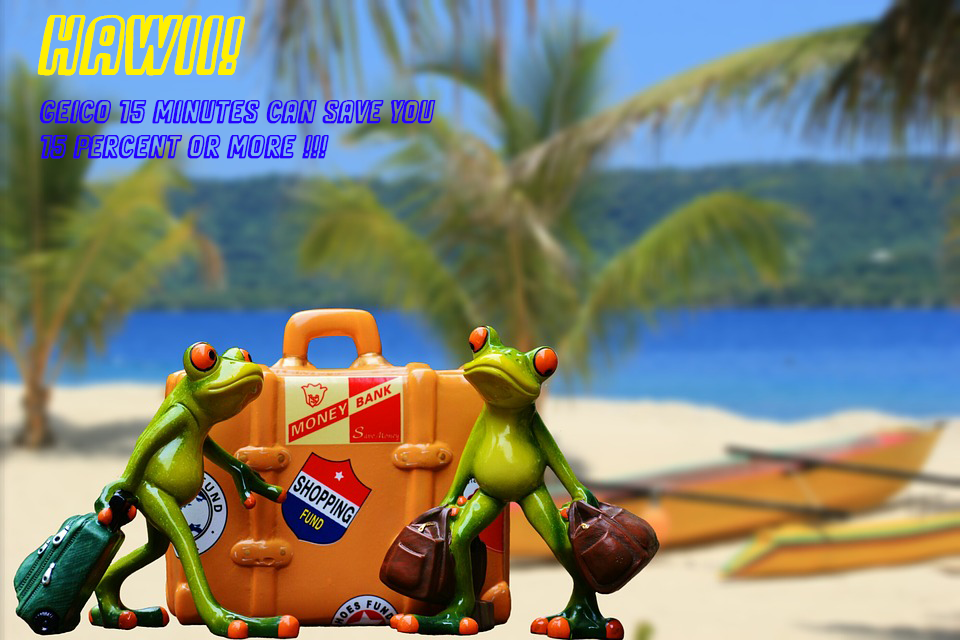
<style>
.page{position:relative;width:960px;height:640px}
.page>*{position:absolute;margin:0}
.t1{font:75px "SweetCake";color:#fff001;font-weight:bold;font-style:italic}
.t2{font:29.2px "SweetCake";color:#2501ff;font-weight:bold;font-style:italic}
</style>
<div class="page">
<p class="t1" style="left:37px;top:15px;width:208px;height:61px">Hawii!</p>
<p class="t2" style="left:39px;top:100px;width:397px;height:59px">GEICO 15 Minutes Can save you <br>15 percent or more !!!</p>
</div>
